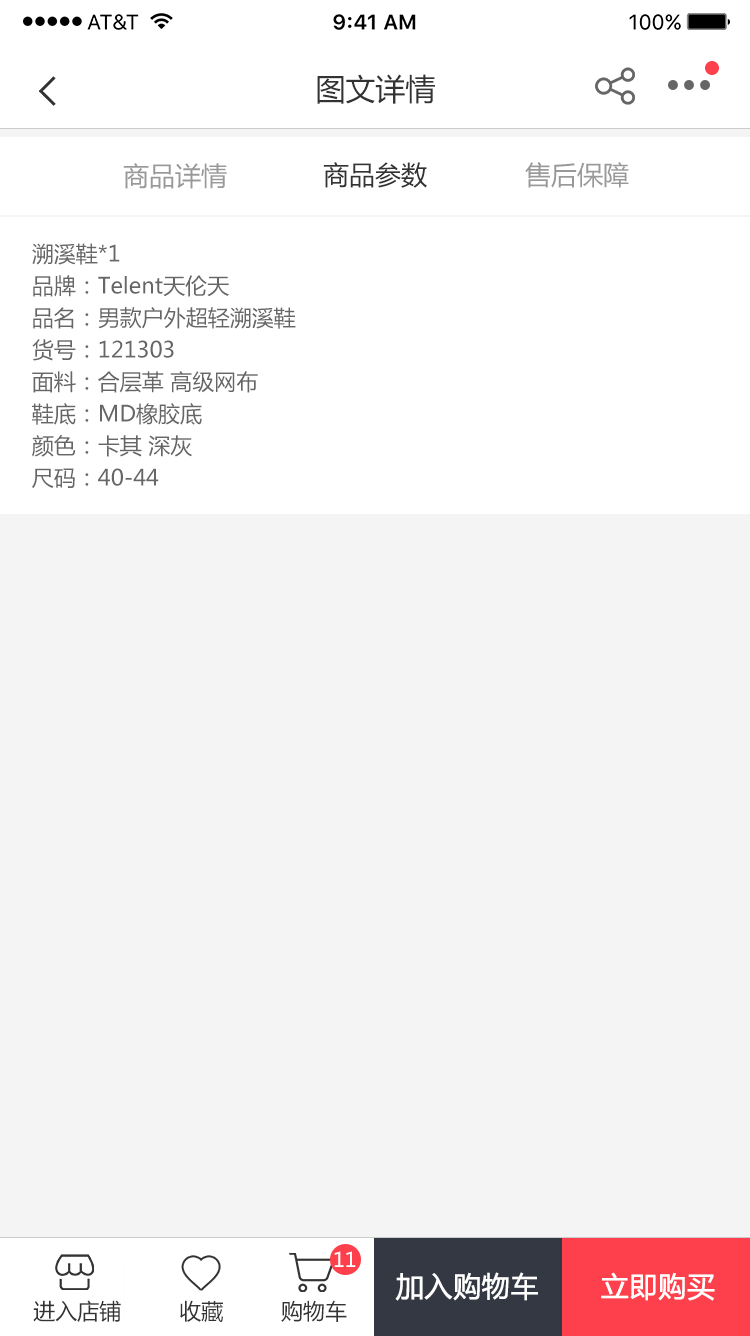
<style>
.page{position:relative;width:750px;height:1336px;background:#f4f4f4}
.page>*{position:absolute;margin:0}
.t1{font:30px "MicrosoftYaHei";color:#333333}
.t2{font:26px "MicrosoftYaHei";color:#999999}
.t3{font:26px "MicrosoftYaHei";color:#333333}
.t4{font:22px/32px "MicrosoftYaHei";color:#666666}
.t5{font:20px "MicrosoftYaHei";color:#ffffff}
.t6{font:28px "MicrosoftYaHei";color:#ffffff;font-weight:bold}
.t7{font:22px "MicrosoftYaHei";color:#333333}
</style>
<div class="page">
<p class="t1" style="left:317px;top:74px;width:118px;height:30px">图文详情</p>
<p class="t2" style="left:123px;top:163px;width:104px;height:26px">商品详情</p>
<p class="t3" style="left:323px;top:162px;width:104px;height:26px">商品参数</p>
<p class="t2" style="left:525px;top:162px;width:104px;height:26px">售后保障</p>
<p class="t4" style="left:32px;top:243px;width:264px;height:245px">溯溪鞋*1<br>品牌：Telent天伦天<br>品名：男款户外超轻溯溪鞋<br>货号：121303<br>面料：合层革 高级网布<br>鞋底：MD橡胶底<br>颜色：卡其 深灰<br>尺码：40-44</p>
<p class="t5" style="left:334px;top:1251px;width:22px;height:16px">11</p>
<p class="t6" style="left:395px;top:1272px;width:143px;height:29px">加入购物车</p>
<p class="t6" style="left:601px;top:1272px;width:114px;height:29px">立即购买</p>
<p class="t7" style="left:33px;top:1300px;width:88px;height:22px">进入店铺</p>
<p class="t7" style="left:180px;top:1300px;width:43px;height:23px">收藏</p>
<p class="t7" style="left:281px;top:1300px;width:66px;height:22px">购物车</p>
</div>
